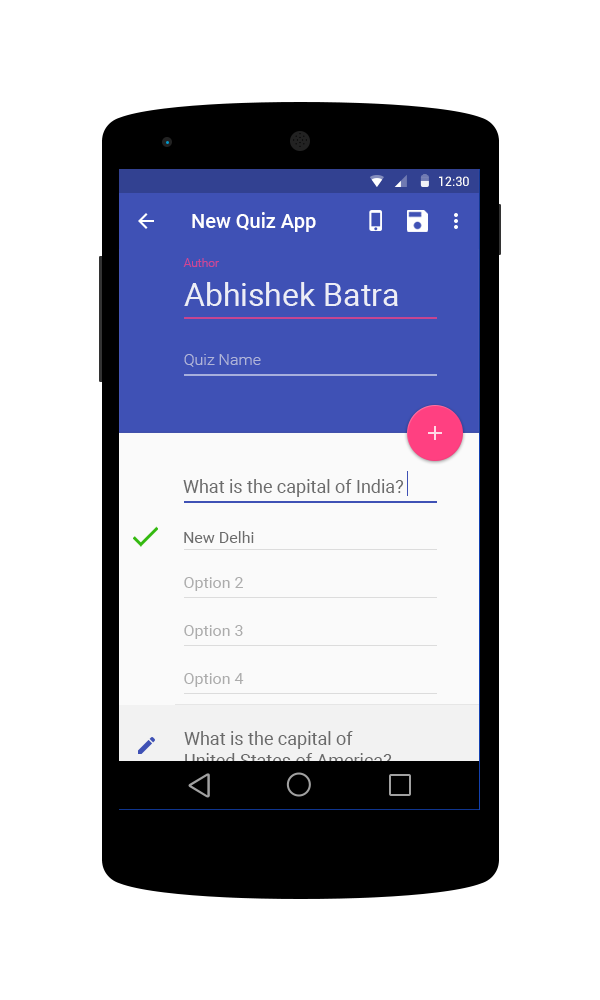
<style>
.page{position:relative;width:600px;height:1000px;background:#ffffff}
.page>*{position:absolute;margin:0}
.t1{font:12.7px "Roboto-Regular";color:#ffffff}
.t2{font:20px "Roboto-Medium";color:#ffffff}
.t3{font:12px "Roboto-Light";color:#d24592}
.t4{font:32px "Roboto-Regular";color:#ffffff}
.t5{font:16px "Roboto-Light";color:#b0b5d9}
.t6{font:18px "Roboto-Regular";color:#6c6c6c}
.t7{font:16px "Roboto-Regular";color:#6c6c6c}
.t8{font:16px "Roboto-Regular";color:#acacac}
.t9{font:16.3px "Roboto-Regular";color:#acacac}
.t10{font:18px "Roboto-Regular"}
</style>
<div class="page">
<p class="t1" style="left:439px;top:176px;width:30px;height:10px">12:30</p>
<p class="t2" style="left:192px;top:212px;width:124px;height:20px">New Quiz App</p>
<p class="t3" style="left:183px;top:258px;width:36px;height:9px">Author</p>
<p class="t4" style="left:184px;top:282px;width:214px;height:24px;opacity:0.87">Abhishek Batra</p>
<p class="t5" style="left:184px;top:354px;width:77px;height:13px">Quiz Name</p>
<p class="t6" style="left:183px;top:479px;width:221px;height:18px">What is the capital of India?</p>
<p class="t7" style="left:184px;top:531px;width:70px;height:12px">New Delhi</p>
<p class="t8" style="left:184px;top:577px;width:59px;height:14px">Option 2</p>
<p class="t9" style="left:184px;top:625px;width:59px;height:14px">Option 3</p>
<p class="t9" style="left:184px;top:673px;width:60px;height:14px">Option 4</p>
<p class="t10" style="left:184px;top:731px;width:208px;height:36px">What is the capital of <br>United States of America?</p>
</div>
